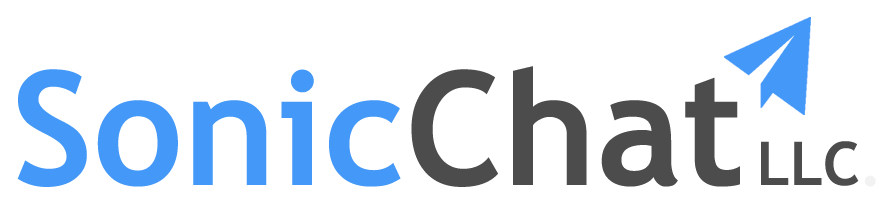
<style>
.page{position:relative;width:879px;height:207px;background:#ffffff}
.page>*{position:absolute;margin:0}
.t1{font:158.8px "TrebuchetMS-Bold";color:#4398f8}
.t2{font:158.8px "TrebuchetMS-Bold";color:#4c4c4c}
.t3{font:60px "TrebuchetMS-Bold";color:#4c4c4c}
.t4{font:60px "TrebuchetMS-Bold";color:#f2f2f2}
</style>
<div class="page">
<p class="t1" style="left:17px;top:66px;width:723px;height:121px">Sonic<span class="t2">Chat</span></p>
<p class="t3" style="left:761px;top:141px;width:115px;height:46px">LLC<span class="t4">.</span></p>
</div>
